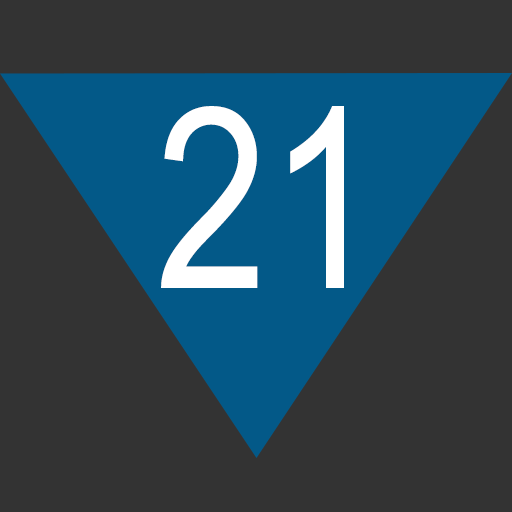
<style>
.page{position:relative;width:512px;height:512px;background:#333333}
.page>*{position:absolute;margin:0}
.t1{font:252.9px "ArialUnicodeMS";color:#ffffff;scale:0.8 1}
</style>
<div class="page">
<p class="t1" style="left:161px;top:106px;width:183px;height:182px">21</p>
</div>
